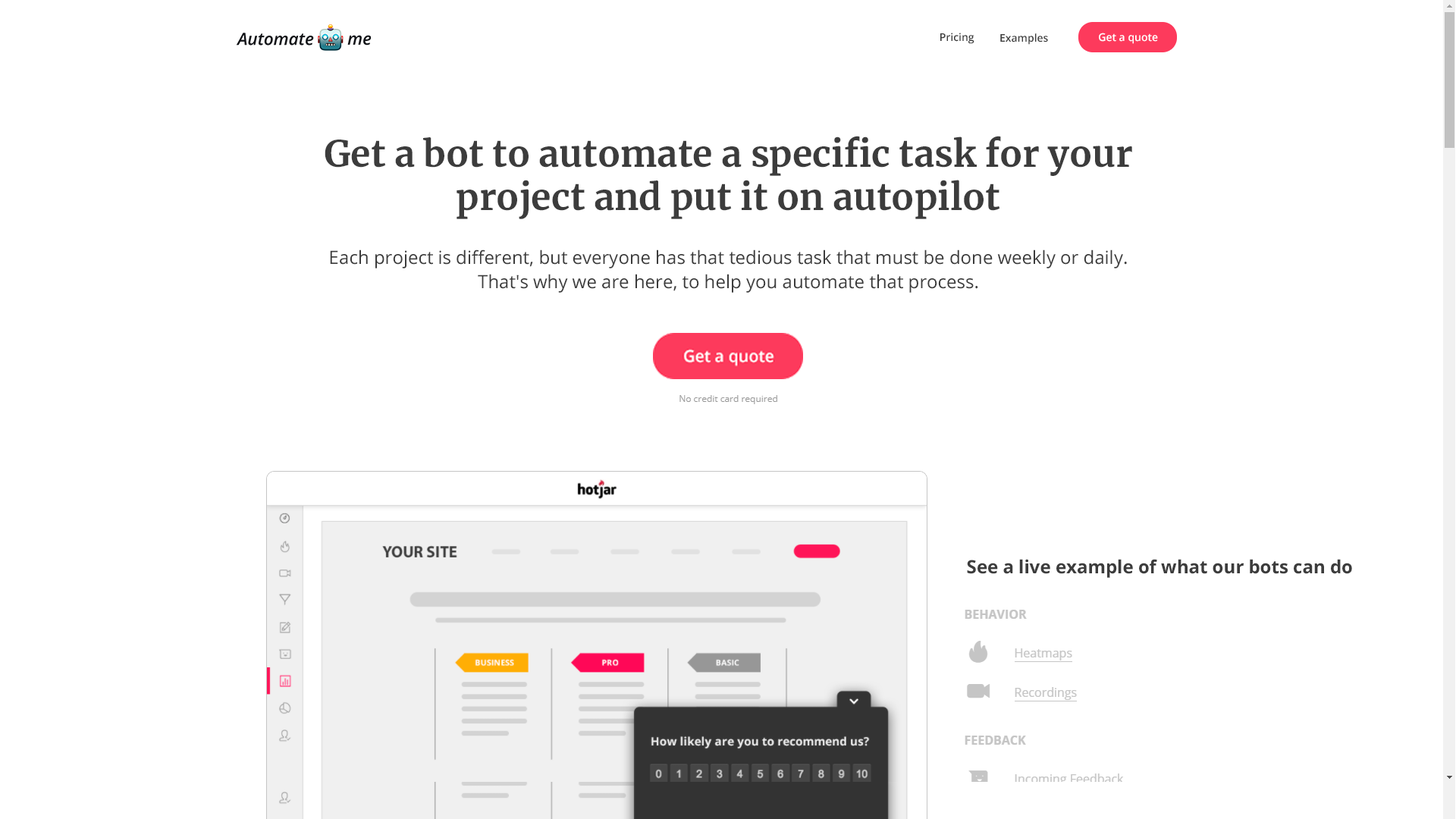
<style>
.page{position:relative;width:1456px;height:819px;background:#ffffff}
.page>*{position:absolute;margin:0}
.t1{font:10.6px "OpenSans-Semibold";color:#3c3c3c}
.t2{font:36.4px/40.9px "Merriweather-Bold";color:#3c3c3c}
.t3{font:18.2px/22px "OpenSans";color:#3c3c3c}
.t4{font:18.2px "OpenSans-Bold";color:#3c3c3c}
</style>
<div class="page">
<p class="t1" style="left:940px;top:33px;width:34px;height:11px">Pricing</p>
<p class="t1" style="left:1000px;top:33px;width:48px;height:12px">Examples</p>
<p class="t2" style="left:325px;top:136px;width:807px;height:83px;text-align:center">Get a bot to automate a specific task for your<br>project and put it on autopilot</p>
<p class="t3" style="left:330px;top:249px;width:797px;height:44px;text-align:center">Each project is different, but everyone has that tedious task that must be done weekly or daily.<br>That's why we are here, to help you automate that process.</p>
<p class="t4" style="left:967px;top:559px;width:385px;height:19px">See a live example of what our bots can do</p>
</div>
